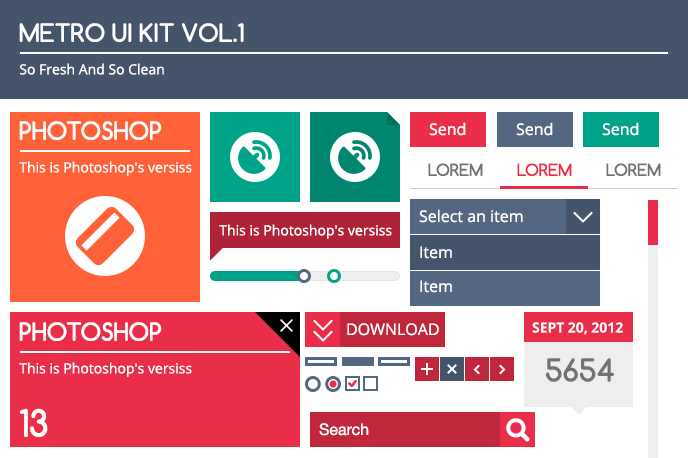
<style>
.page{position:relative;width:688px;height:458px;background:#ffffff}
.page>*{position:absolute;margin:0}
.t1{font:24px "Comfortaa-Bold";color:#ffffff}
.t2{font:14px "OpenSans";color:#ffffff}
.t3{font:16px "OpenSans";color:#ffffff}
.t4{font:16px "Comfortaa-Bold";color:#727273}
.t5{font:16px "Comfortaa-Bold";color:#ea2e49}
.t6{font:14px "OpenSans-Bold";color:#ffffff}
.t7{font:30px "Comfortaa-Bold";color:#727273}
.t8{font:36px "Comfortaa-Bold";color:#ffffff}
.t9{font:16px "HelveticaNeue";color:#ffffff}
</style>
<div class="page">
<p class="t1" style="left:19px;top:23px;width:225px;height:19px">METRO UI KIT VOL.1</p>
<p class="t2" style="left:20px;top:63px;width:144px;height:12px">So Fresh And So Clean</p>
<p class="t1" style="left:19px;top:121px;width:143px;height:19px">PHOTOSHOP</p>
<p class="t3" style="left:429px;top:122px;width:37px;height:14px">Send</p>
<p class="t3" style="left:516px;top:122px;width:37px;height:14px">Send</p>
<p class="t3" style="left:602px;top:122px;width:37px;height:14px">Send</p>
<p class="t2" style="left:19px;top:161px;width:173px;height:15px">This is Photoshop's versiss</p>
<p class="t4" style="left:428px;top:163px;width:55px;height:13px">LOREM</p>
<p class="t5" style="left:517px;top:163px;width:55px;height:13px">LOREM</p>
<p class="t4" style="left:606px;top:163px;width:55px;height:13px">LOREM</p>
<p class="t3" style="left:419px;top:209px;width:104px;height:14px">Select an item</p>
<p class="t2" style="left:219px;top:224px;width:173px;height:15px">This is Photoshop's versiss</p>
<p class="t3" style="left:420px;top:246px;width:32px;height:13px">Item</p>
<p class="t3" style="left:420px;top:280px;width:32px;height:13px">Item</p>
<p class="t1" style="left:19px;top:322px;width:143px;height:19px">PHOTOSHOP</p>
<p class="t3" style="left:347px;top:323px;width:92px;height:13px">DOWNLOAD</p>
<p class="t6" style="left:532px;top:322px;width:91px;height:13px">SEPT 20, 2012</p>
<p class="t2" style="left:19px;top:362px;width:173px;height:15px">This is Photoshop's versiss</p>
<p class="t7" style="left:546px;top:358px;width:68px;height:24px">5654</p>
<p class="t8" style="left:20px;top:408px;width:28px;height:29px">13</p>
<p class="t9" style="left:319px;top:423px;width:50px;height:13px">Search</p>
</div>
